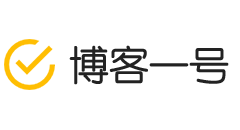
<style>
.page{position:relative;width:240px;height:130px;background:#ffffff}
.page>*{position:absolute;margin:0}
.t1{font:40px "STYuanti-SC-Regular";color:#222222}
</style>
<div class="page">
<p class="t1" style="left:69px;top:45px;width:160px;height:40px">博客一号</p>
</div>
